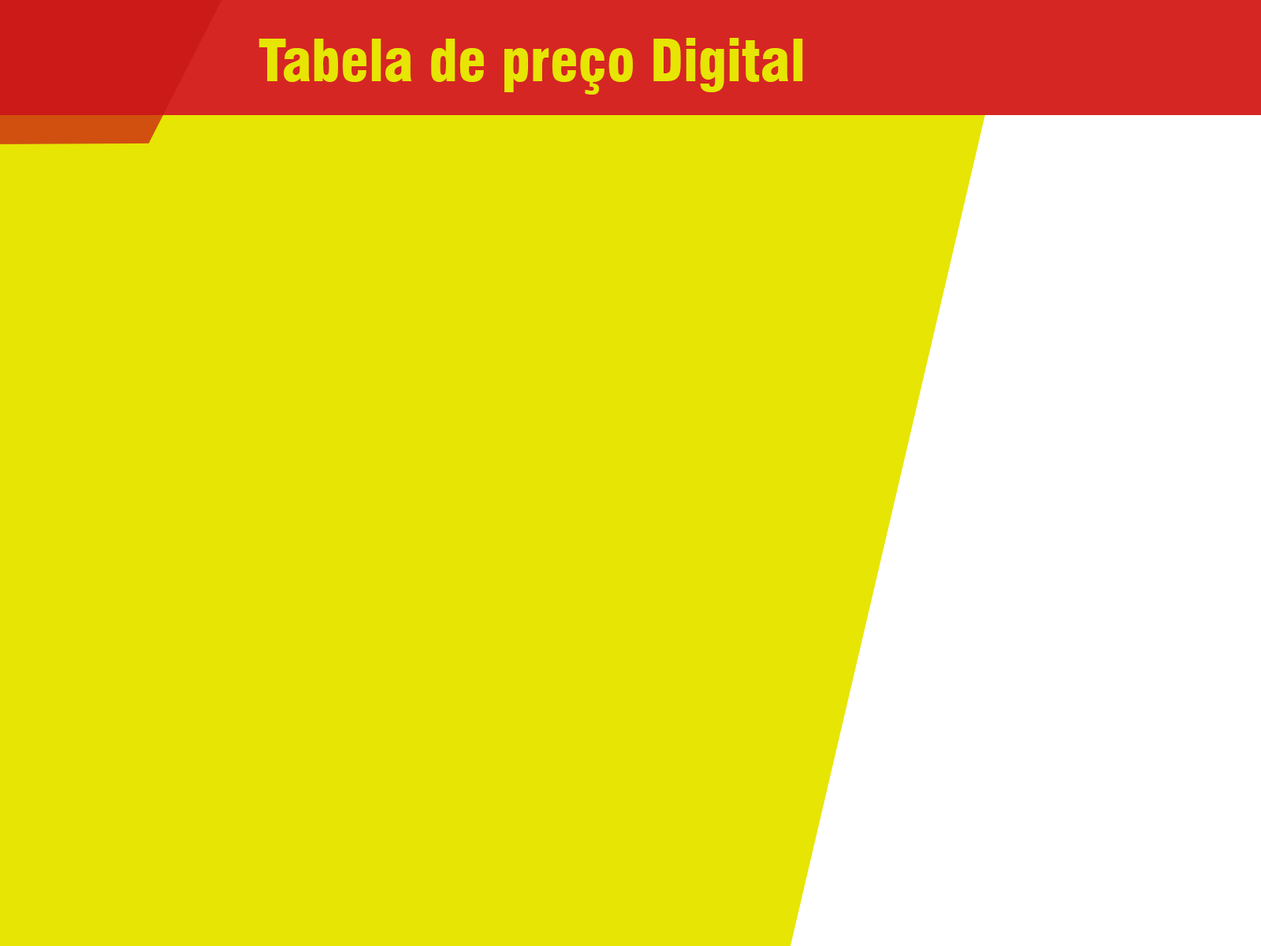
<style>
.page{position:relative;width:1261px;height:946px;background:#e7e503}
.page>*{position:absolute;margin:0}
.t1{font:56.7px "Swiss721BT-BlackCondensed";color:#e7e503}
</style>
<div class="page">
<p class="t1" style="left:258px;top:38px;width:545px;height:57px">Tabela de preço Digital</p>
</div>
